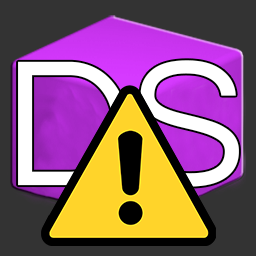
<style>
.page{position:relative;width:256px;height:256px;background:#333333}
.page>*{position:absolute;margin:0}
.t1{font:186.1px "Questrial-Regular";letter-spacing:-0.02em;color:#ffffff}
</style>
<div class="page">
<p class="t1" style="left:18px;top:60px;width:221px;height:127px">DS</p>
</div>
